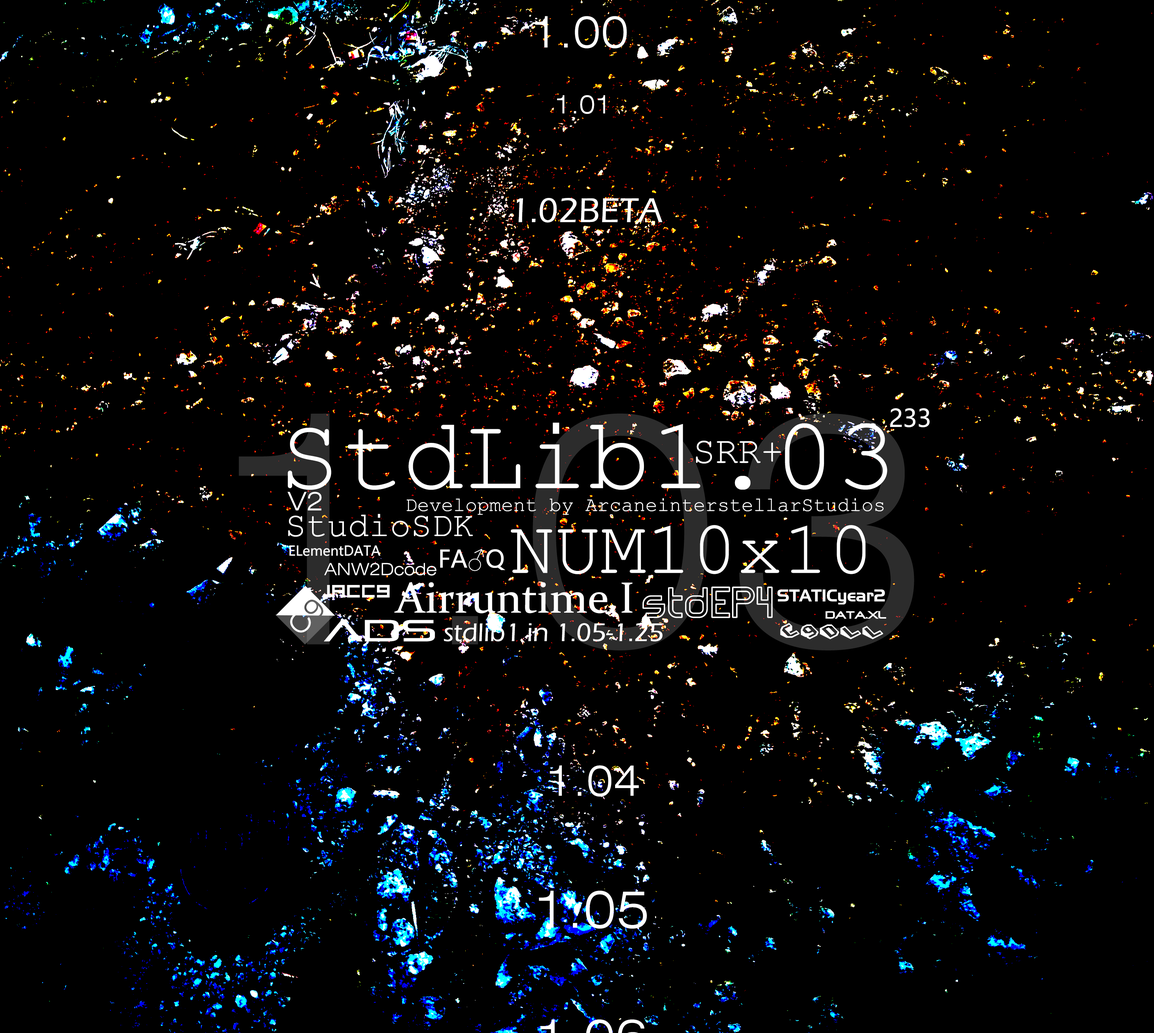
<style>
.page{position:relative;width:1154px;height:1033px;background:#000000}
.page>*{position:absolute;margin:0}
.t1{font:43.3px "860-CAI978";color:#ffffff}
.t2{font:25.1px "860-CAI978";color:#ffffff}
.t3{font:35.5px "ErasITC-Medium";color:#ffffff}
.t4{font:24.1px "MicrosoftYaHei";color:#ffffff}
.t5{font:103.1px "CourierNewPSMT";color:#ffffff}
.t6{font:37.9px "CourierNewPSMT";color:#ffffff}
.t7{font:25.5px "860-CAI978";color:#ffffff}
.t8{font:20px "CourierNewPSMT";color:#ffffff}
.t9{font:34.9px "CourierNewPSMT";color:#ffffff}
.t10{font:76px "CourierNewPSMT";color:#ffffff}
.t11{font:13.4px "MicrosoftYaHei";color:#ffffff}
.t12{font:23.8px "MicrosoftYaHei";color:#ffffff}
.t13{font:16.7px "860-CAI978";color:#ffffff}
.t14{font:43.9px "Constantia";color:#ffffff}
.t15{font:19.9px "331-CAI978";color:#ffffff}
.t16{font:40.7px "568-CAI978";color:#ffffff}
.t17{font:16.4px "435-CAI978";color:#ffffff}
.t18{font:11.8px "497-CAI978";color:#ffffff}
.t19{font:30.2px "PirulenRg-Regular";color:#ffffff;scale:1.24 1}
.t20{font:26.3px "ErasITC-Medium";color:#ffffff}
.t21{font:23.5px "332-CAI978";color:#ffffff}
.t22{font:41.8px "860-CAI978";color:#ffffff}
.t23{font:51px "860-CAI978";color:#ffffff}
</style>
<div class="page">
<p class="t1" style="left:535px;top:16px;width:92px;height:32px">1.00</p>
<p class="t2" style="left:557px;top:95px;width:48px;height:19px">1.01</p>
<p class="t3" style="left:517px;top:198px;width:146px;height:25px">1.02BETA</p>
<p class="t4" style="left:890px;top:408px;width:40px;height:19px">233</p>
<p class="t5" style="left:288px;top:423px;width:600px;height:67px">StdLib1.03</p>
<p class="t6" style="left:696px;top:441px;width:85px;height:23px">SRR+</p>
<p class="t7" style="left:287px;top:492px;width:35px;height:19px">V2</p>
<p class="t8" style="left:407px;top:498px;width:477px;height:17px">Development by ArcaneinterstellarStudios</p>
<p class="t9" style="left:288px;top:514px;width:185px;height:23px">StudioSDK</p>
<p class="t10" style="left:511px;top:525px;width:355px;height:49px">NUM10x10</p>
<p class="t11" style="left:289px;top:545px;width:92px;height:11px">ELementDATA</p>
<p class="t12" style="left:440px;top:549px;width:65px;height:22px">FA♂Q</p>
<p class="t13" style="left:324px;top:563px;width:113px;height:13px">ANW2Dcode</p>
<p class="t14" style="left:394px;top:582px;width:239px;height:31px">Airruntime I</p>
<p class="t15" style="left:327px;top:585px;width:63px;height:13px">IACC9</p>
<p class="t16" style="left:643px;top:586px;width:130px;height:32px">stdEP4</p>
<p class="t17" style="left:778px;top:589px;width:107px;height:16px">STATICyear2</p>
<p class="t18" style="left:826px;top:611px;width:60px;height:8px">DATA.XL</p>
<p class="t19" style="left:324px;top:620px;width:111px;height:22px">aDS</p>
<p class="t20" style="left:444px;top:623px;width:219px;height:19px">stdlib1 in 1.05-1.25</p>
<p class="t21" style="left:780px;top:623px;width:104px;height:16px">C9DLL</p>
<p class="t22" style="left:550px;top:765px;width:89px;height:32px">1.04</p>
<p class="t23" style="left:539px;top:891px;width:108px;height:38px">1.05</p>
</div>
